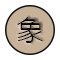
<style>
.page{position:relative;width:60px;height:60px;background:#ffffff}
.page>*{position:absolute;margin:0}
.t1{font:29.6px "MicrosoftJhengHeiRegular";color:#000000}
</style>
<div class="page">
<p class="t1" style="left:17px;top:17px;width:26px;height:26px">象</p>
</div>
